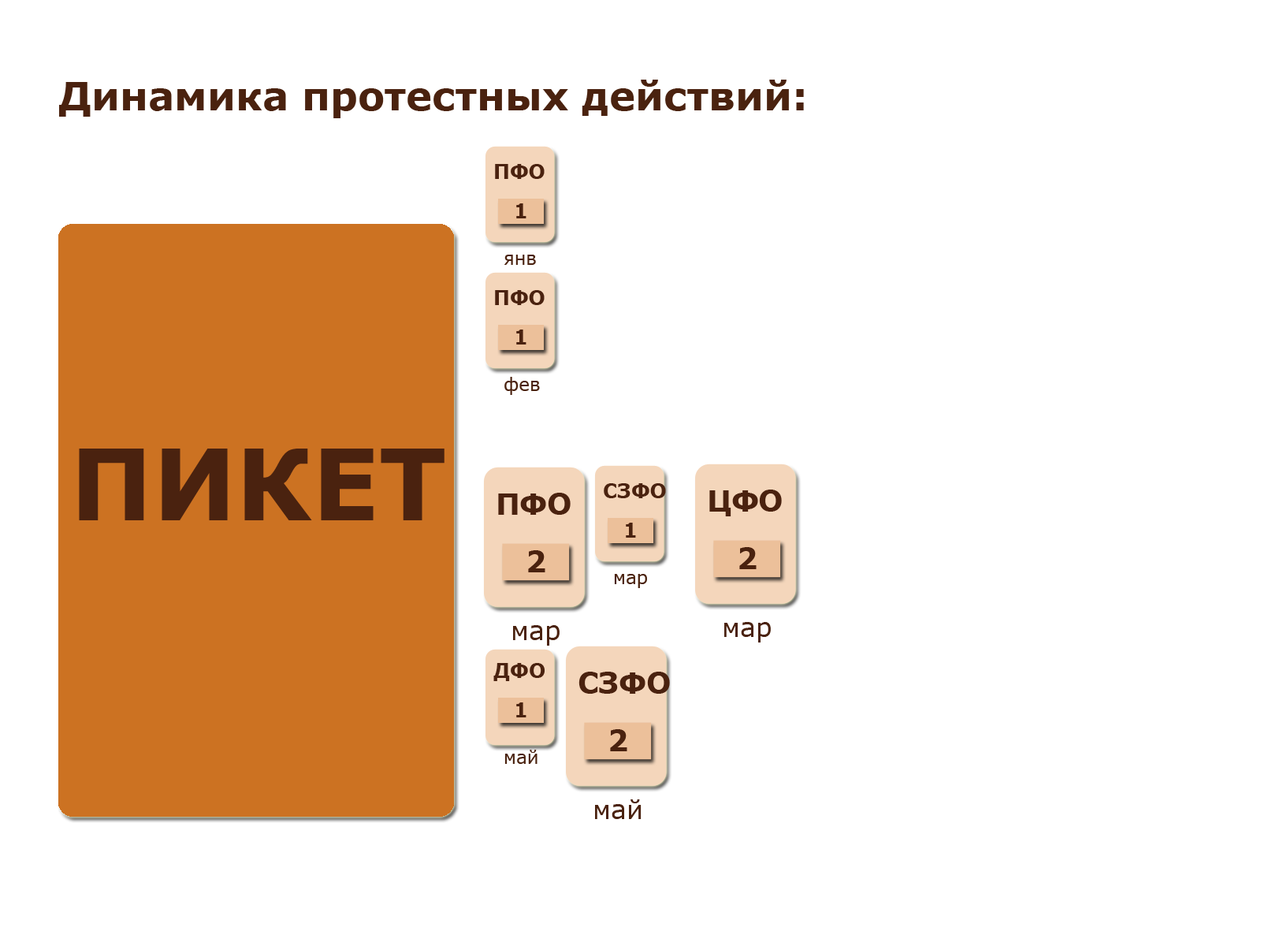
<style>
.page{position:relative;width:1261px;height:946px;background:#ffffff}
.page>*{position:absolute;margin:0}
.t1{font:39.4px "Verdana-Bold";color:#4a220f}
.t2{font:19.7px "Verdana-Bold";color:#4a220f}
.t3{font:18.1px "Verdana";color:#4a220f}
.t4{font:98.5px "Verdana-Bold";color:#4a220f}
.t5{font:28.8px "Verdana-Bold";color:#4a220f}
.t6{font:26.4px "Verdana";color:#4a220f}
</style>
<div class="page">
<p class="t1" style="left:59px;top:80px;width:745px;height:38px">Динамика протестных действий:</p>
<p class="t2" style="left:495px;top:164px;width:50px;height:15px">ПФО</p>
<p class="t2" style="left:516px;top:203px;width:10px;height:15px">1</p>
<p class="t3" style="left:504px;top:255px;width:32px;height:10px">янв</p>
<p class="t2" style="left:495px;top:290px;width:50px;height:15px">ПФО</p>
<p class="t2" style="left:516px;top:329px;width:10px;height:15px">1</p>
<p class="t3" style="left:504px;top:377px;width:36px;height:18px">фев</p>
<p class="t4" style="left:79px;top:448px;width:365px;height:72px">ПИКЕТ</p>
<p class="t2" style="left:604px;top:483px;width:62px;height:15px">СЗФО</p>
<p class="t5" style="left:498px;top:493px;width:73px;height:22px">ПФО</p>
<p class="t5" style="left:709px;top:489px;width:73px;height:27px">ЦФО</p>
<p class="t2" style="left:626px;top:522px;width:10px;height:15px">1</p>
<p class="t5" style="left:528px;top:550px;width:17px;height:22px">2</p>
<p class="t5" style="left:739px;top:547px;width:18px;height:22px">2</p>
<p class="t3" style="left:614px;top:574px;width:33px;height:14px">мар</p>
<p class="t6" style="left:513px;top:625px;width:47px;height:20px">мар</p>
<p class="t6" style="left:724px;top:622px;width:47px;height:20px">мар</p>
<p class="t2" style="left:493px;top:663px;width:52px;height:18px">ДФО</p>
<p class="t5" style="left:578px;top:671px;width:92px;height:23px">СЗФО</p>
<p class="t2" style="left:516px;top:702px;width:10px;height:15px">1</p>
<p class="t5" style="left:610px;top:729px;width:17px;height:22px">2</p>
<p class="t3" style="left:504px;top:749px;width:33px;height:15px">май</p>
<p class="t6" style="left:595px;top:799px;width:46px;height:20px">май</p>
</div>
